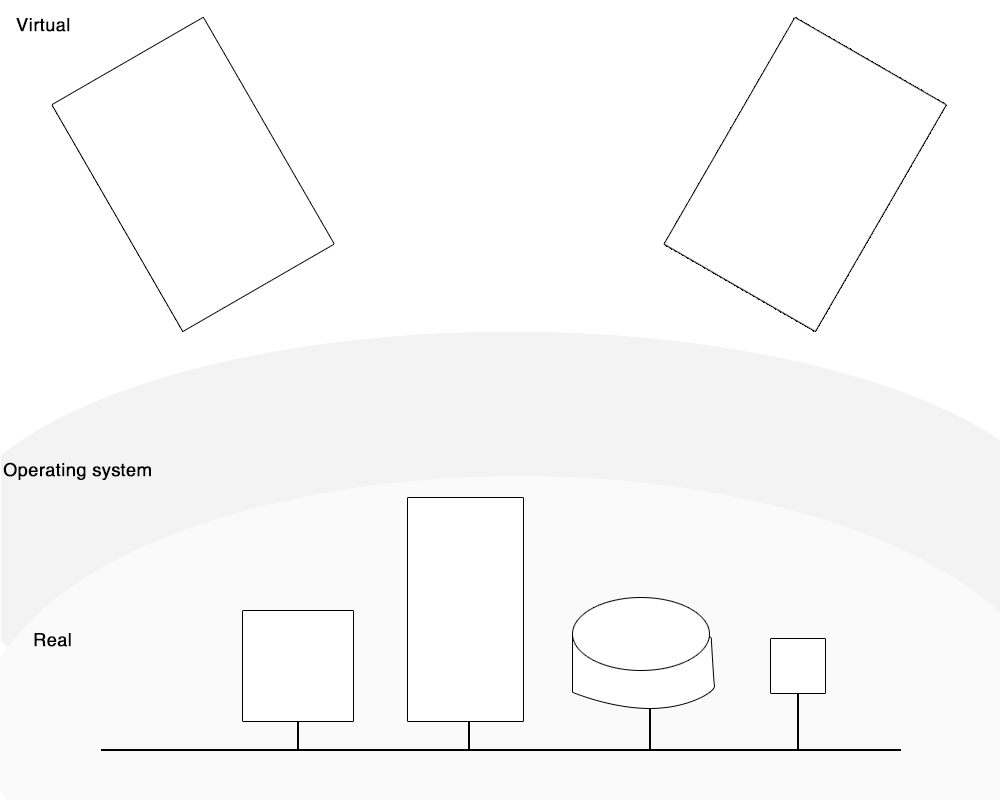
<style>
.page{position:relative;width:1000px;height:800px;background:#ffffff}
.page>*{position:absolute;margin:0}
.t1{font:18px "Helvetica";color:#000000;font-weight:bold}
</style>
<div class="page">
<p class="t1" style="left:16px;top:18px;width:54px;height:14px">Virtual</p>
<p class="t1" style="left:3px;top:462px;width:148px;height:18px">Operating system</p>
<p class="t1" style="left:34px;top:633px;width:37px;height:14px">Real</p>
</div>
